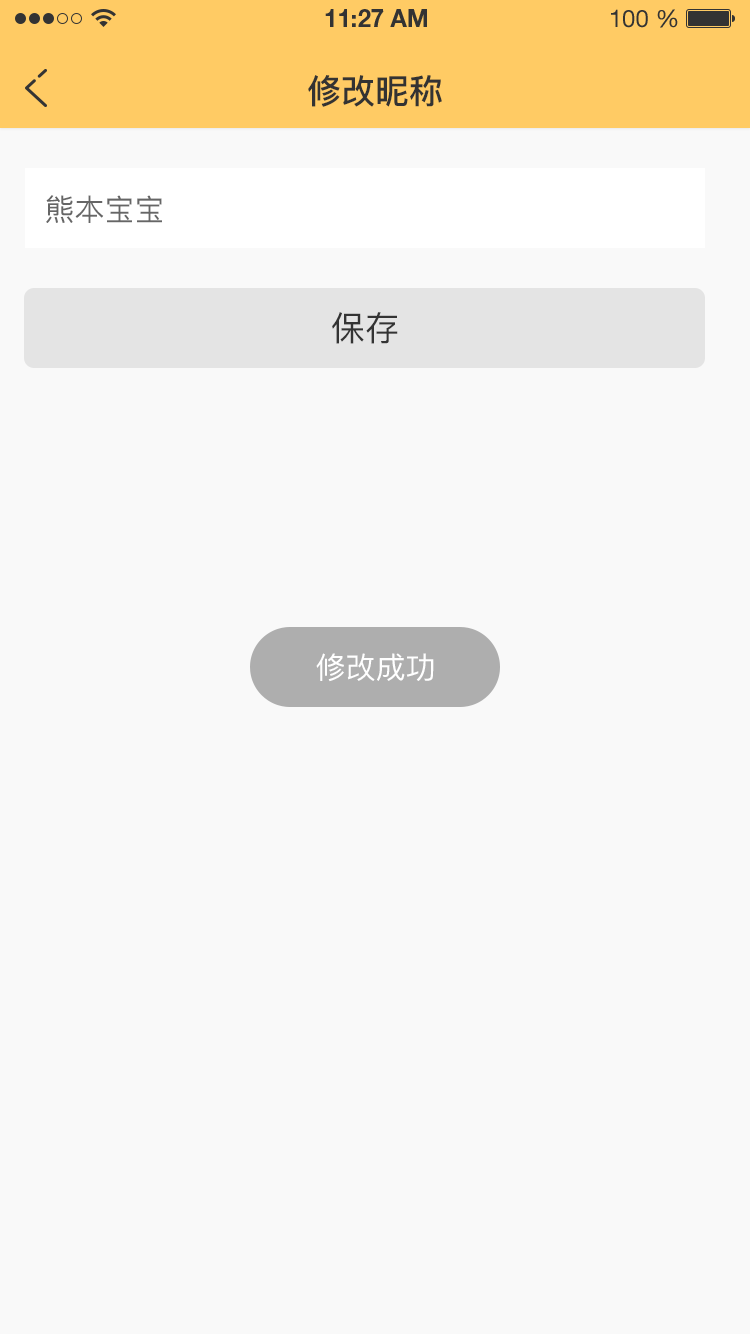
<style>
.page{position:relative;width:750px;height:1334px;background:#f9f9f9}
.page>*{position:absolute;margin:0}
.t1{font:34px "PingFang-SC-Bold";color:#333333;text-transform:uppercase}
.t2{font:30px "PingFang-SC-Medium";color:#666666;text-transform:uppercase}
.t3{font:34px "PingFang-SC-Medium";color:#333333;text-transform:uppercase}
.t4{font:30px "PingFang-SC-Medium";color:#ffffff;text-transform:uppercase}
</style>
<div class="page">
<p class="t1" style="left:308px;top:75px;width:134px;height:32px">修改昵称</p>
<p class="t2" style="left:46px;top:195px;width:116px;height:28px">熊本宝宝</p>
<p class="t3" style="left:332px;top:312px;width:66px;height:32px">保存</p>
<p class="t4" style="left:316px;top:653px;width:118px;height:29px">修改成功</p>
</div>
